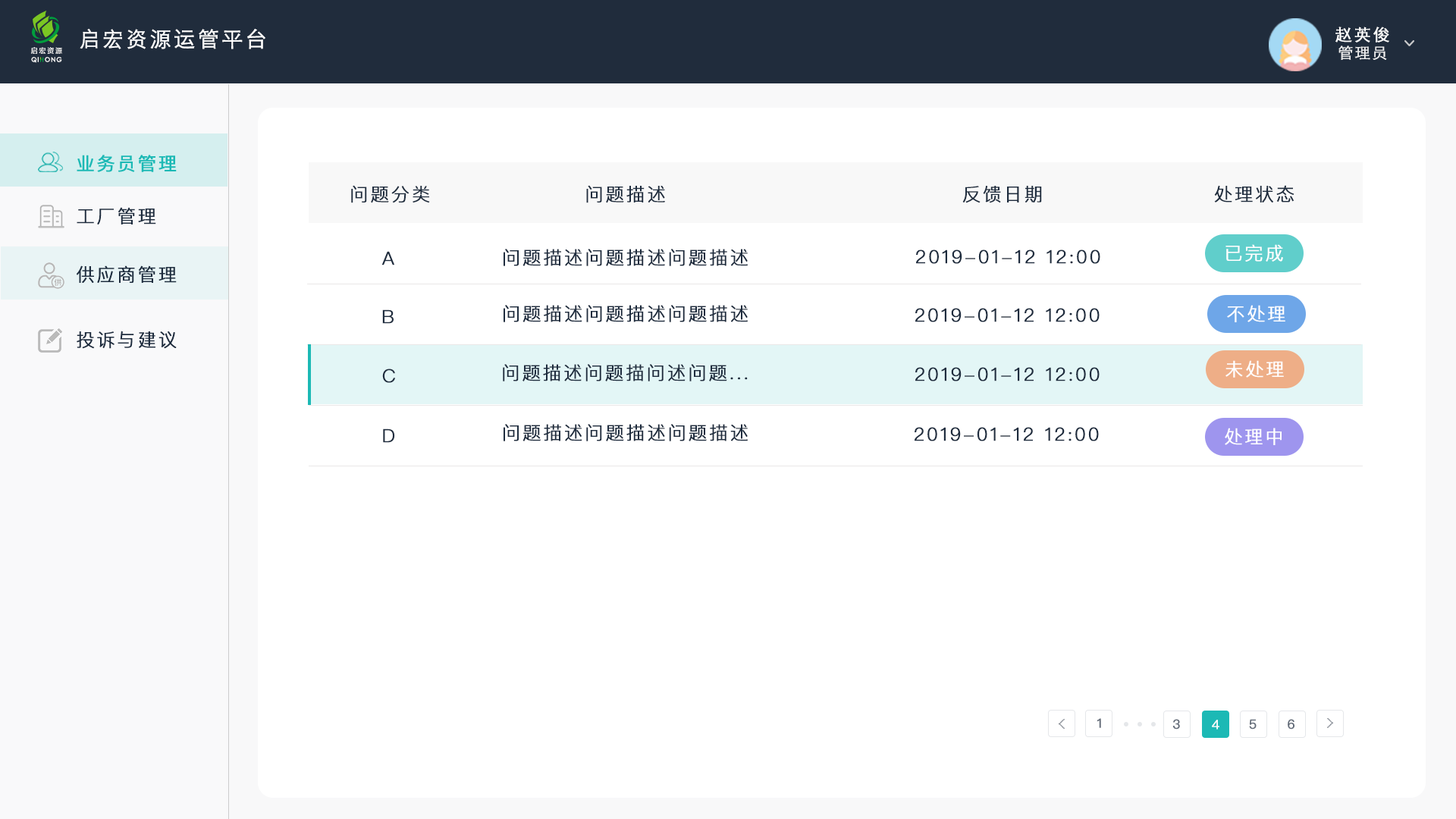
<style>
.page{position:relative;width:1456px;height:819px;background:#ffffff}
.page>*{position:absolute;margin:0}
.t1{font:21.2px "STHeitiSC-Light";letter-spacing:0.1em;color:#ffffff;font-weight:bold}
.t2{font:16.7px "STHeitiSC-Light";letter-spacing:0.1em;color:#ffffff;font-weight:bold}
.t3{font:7px "FZLTZHK--GBK1-0";letter-spacing:0.18em;color:#ffffff}
.t4{font:15.2px "STHeitiSC-Light";letter-spacing:0.1em;color:#ffffff;font-weight:bold}
.t5{font:6.3px "CenturyGothic";letter-spacing:0.1em;color:#ffffff;font-weight:bold}
.t6{font:18.2px "PingFangSC-Regular";letter-spacing:0.1em;color:#1cb9b5;font-weight:bold}
.t7{font:18.2px "PingFangSC-Light";letter-spacing:0.1em;color:#1e2c3e;font-weight:bold}
.t8{font:18.2px "PingFangSC-Light";letter-spacing:0.1em;color:#ffffff;font-weight:bold}
.t9{font:12.7px "PingFangSC-Regular";letter-spacing:0.1em;color:#626b78;font-weight:bold}
.t10{font:12.7px "PingFangSC-Regular";letter-spacing:0.1em;color:#ffffff;font-weight:bold}
</style>
<div class="page">
<p class="t1" style="left:80px;top:29px;width:185px;height:20px">启宏资源运管平台</p>
<p class="t2" style="left:1335px;top:27px;width:54px;height:15px">赵英俊</p>
<p class="t3" style="left:31px;top:47px;width:31px;height:7px">启宏资源</p>
<p class="t4" style="left:1338px;top:45px;width:49px;height:15px;opacity:0.9">管理员</p>
<p class="t5" style="left:31px;top:57px;width:31px;height:6px">QI  ONG</p>
<p class="t6" style="left:77px;top:155px;width:100px;height:17px">业务员管理</p>
<p class="t7" style="left:351px;top:185px;width:79px;height:18px">问题分类</p>
<p class="t7" style="left:586px;top:185px;width:79px;height:18px">问题描述</p>
<p class="t7" style="left:962px;top:186px;width:80px;height:17px">反馈日期</p>
<p class="t7" style="left:1214px;top:185px;width:80px;height:17px">处理状态</p>
<p class="t7" style="left:77px;top:207px;width:79px;height:17px">工厂管理</p>
<p class="t8" style="left:1225px;top:244px;width:58px;height:18px">已完成</p>
<p class="t7" style="left:381px;top:251px;width:13px;height:14px">A</p>
<p class="t7" style="left:504px;top:249px;width:244px;height:17px">问题描述问题描述问题描述</p>
<p class="t7" style="left:916px;top:249px;width:184px;height:15px">2019-01-12 12:00</p>
<p class="t7" style="left:77px;top:265px;width:100px;height:18px">供应商管理</p>
<p class="t7" style="left:504px;top:305px;width:244px;height:17px">问题描述问题描述问题描述</p>
<p class="t8" style="left:1227px;top:305px;width:58px;height:17px">不处理</p>
<p class="t7" style="left:382px;top:309px;width:12px;height:15px">B</p>
<p class="t7" style="left:915px;top:308px;width:185px;height:14px">2019-01-12 12:00</p>
<p class="t7" style="left:77px;top:331px;width:100px;height:18px">投诉与建议</p>
<p class="t7" style="left:503px;top:364px;width:245px;height:17px">问题描述问题描问述问题...</p>
<p class="t8" style="left:1225px;top:360px;width:59px;height:18px">未处理</p>
<p class="t7" style="left:382px;top:369px;width:13px;height:14px">C</p>
<p class="t7" style="left:915px;top:367px;width:185px;height:14px">2019-01-12 12:00</p>
<p class="t7" style="left:504px;top:424px;width:244px;height:17px">问题描述问题描述问题描述</p>
<p class="t7" style="left:383px;top:428px;width:12px;height:15px">D</p>
<p class="t7" style="left:915px;top:427px;width:184px;height:14px">2019-01-12 12:00</p>
<p class="t8" style="left:1225px;top:428px;width:57px;height:17px">处理中</p>
<p class="t9" style="left:1097px;top:718px;width:4px;height:10px">1</p>
<p class="t9" style="left:1172px;top:719px;width:8px;height:11px">3</p>
<p class="t10" style="left:1212px;top:720px;width:7px;height:10px">4</p>
<p class="t9" style="left:1249px;top:719px;width:8px;height:11px">5</p>
<p class="t9" style="left:1288px;top:719px;width:6px;height:11px">6</p>
</div>
